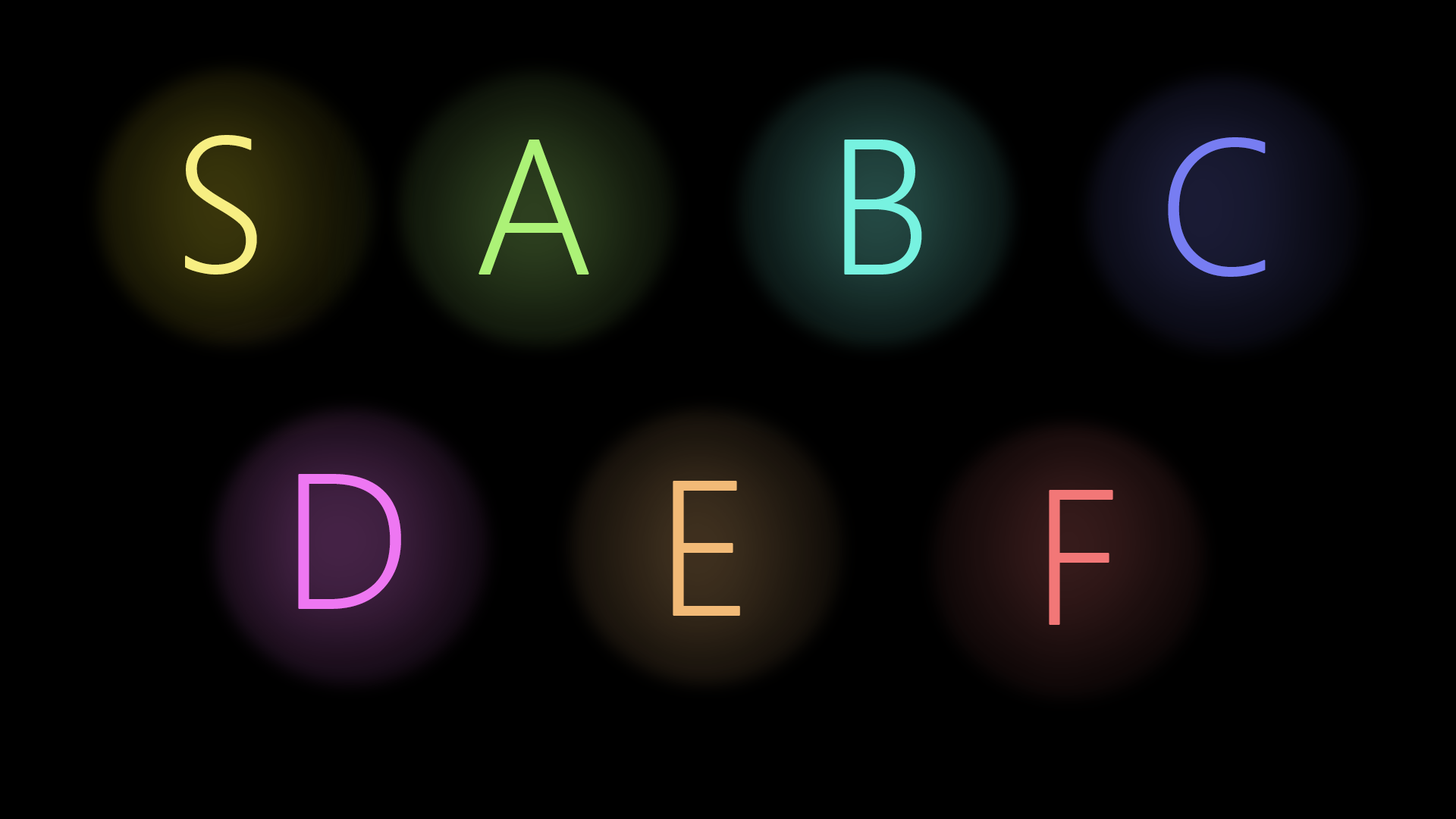
<style>
.page{position:relative;width:1456px;height:819px;background:#000000}
.page>*{position:absolute;margin:0}
.t1{font:190px "SegoeUI-Light";letter-spacing:0.05em;color:#f7ee82;font-weight:bold}
.t2{font:190px "SegoeUI-Light";letter-spacing:0.05em;color:#777df2;font-weight:bold}
.t3{font:190px "SegoeUI-Light";letter-spacing:0.05em;color:#acf277;font-weight:bold}
.t4{font:190px "SegoeUI-Light";letter-spacing:0.05em;color:#77f2e0;font-weight:bold}
.t5{font:190px "SegoeUI-Light";letter-spacing:0.05em;color:#ee77f2;font-weight:bold}
.t6{font:190px "SegoeUI-Light";letter-spacing:0.05em;color:#f2ba77;font-weight:bold}
.t7{font:190px "SegoeUI-Light";letter-spacing:0.05em;color:#f27777;font-weight:bold}
</style>
<div class="page">
<p class="t1" style="left:185px;top:135px;width:72px;height:140px">S</p>
<p class="t2" style="left:1168px;top:137px;width:98px;height:140px">C</p>
<p class="t3" style="left:479px;top:140px;width:110px;height:135px">A</p>
<p class="t4" style="left:844px;top:140px;width:78px;height:135px">B</p>
<p class="t5" style="left:298px;top:474px;width:103px;height:135px">D</p>
<p class="t6" style="left:673px;top:481px;width:67px;height:135px">E</p>
<p class="t7" style="left:1049px;top:490px;width:64px;height:135px">F</p>
</div>
